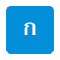
<style>
.page{position:relative;width:60px;height:60px;background:#018fd9}
.page>*{position:absolute;margin:0}
.t1{font:36px "DBComYardX-Bold";color:#ffffff}
</style>
<div class="page">
<p class="t1" style="left:24px;top:22px;width:12px;height:13px">ก</p>
</div>
